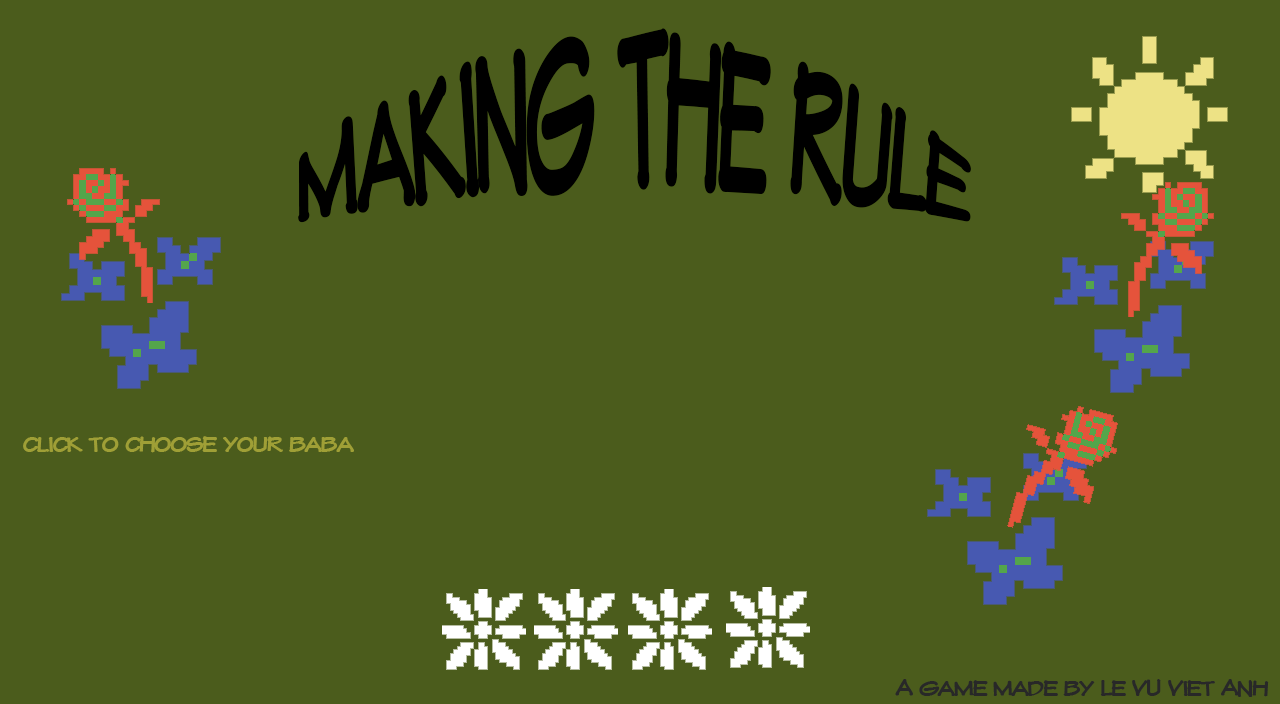
<style>
.page{position:relative;width:1280px;height:704px;background:#4b5c1c}
.page>*{position:absolute;margin:0}
.t1{font:101.9px "MTOCOMIC-Regular";color:#000000;scale:0.82 1}
.t2{font:24.7px "MTOCOMIC-Regular";color:#9f9f36}
.t3{font:24.7px "MTOCOMIC-Regular";color:#282828}
</style>
<div class="page">
<p class="t1" style="left:298px;top:28px;width:673px;height:195px">Making the rule</p>
<p class="t2" style="left:23px;top:436px;width:331px;height:17px">click to choose your baba</p>
<p class="t3" style="left:895px;top:679px;width:374px;height:18px">A game made by Le VU Viet ANh</p>
</div>
